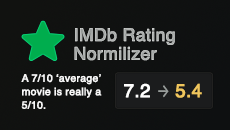
<style>
.page{position:relative;width:230px;height:130px}
.page>*{position:absolute;margin:0}
.t1{font:17.5px/18.8px "Helvetica";color:#afb3b1;font-weight:bold}
.t2{font:10.4px/13.5px "Helvetica";color:#f8f8f8;font-weight:bold}
.t3{font:18.5px "Helvetica";color:#ffffff;font-weight:bold}
.t4{font:18.5px "Inter-Regular";color:#979c9a;font-weight:bold;scale:0.74 1}
.t5{font:18.5px "Helvetica";color:#f0c65d;font-weight:bold}
</style>
<div class="page">
<p class="t1" style="left:74px;top:28px;width:101px;height:33px">IMDb Rating<br>Normilizer</p>
<p class="t2" style="left:21px;top:74px;width:81px;height:35px">A 7/10 ‘average’ movie is really a 5/10.</p>
<p class="t3" style="left:124px;top:83px;width:78px;height:15px">7.2 <span class="t4">→ </span><span class="t5">5.4</span></p>
</div>
